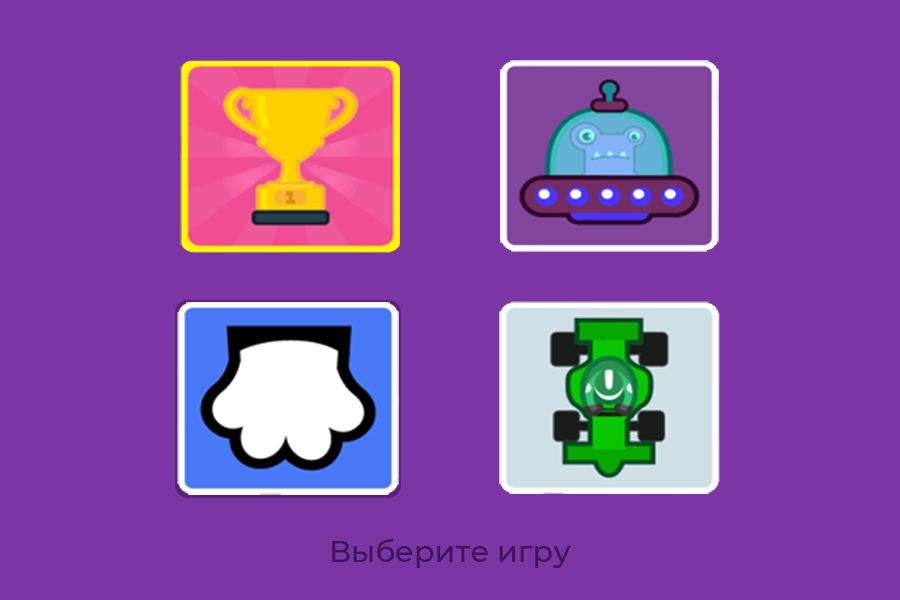
<style>
.page{position:relative;width:900px;height:600px;background:#7b35a5}
.page>*{position:absolute;margin:0}
.t1{font:30px "Montserrat-Medium";color:#401458}
</style>
<div class="page">
<p class="t1" style="left:332px;top:538px;width:239px;height:30px">Выберите игру</p>
</div>
